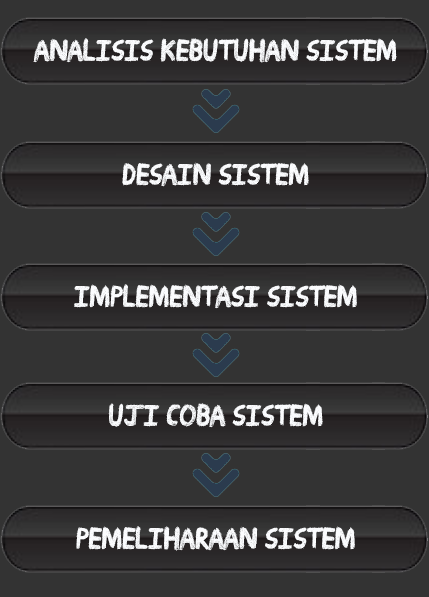
<style>
.page{position:relative;width:429px;height:597px;background:#333333}
.page>*{position:absolute;margin:0}
.t1{font:29.2px "Drawing-Guides";color:#fbfcfe;text-transform:uppercase}
</style>
<div class="page">
<p class="t1" style="left:33px;top:38px;width:364px;height:25px">Analisis Kebutuhan Sistem</p>
<p class="t1" style="left:122px;top:162px;width:187px;height:25px">Desain Sistem</p>
<p class="t1" style="left:74px;top:284px;width:283px;height:25px">Implementasi Sistem</p>
<p class="t1" style="left:108px;top:403px;width:215px;height:25px">Uji Coba Sistem</p>
<p class="t1" style="left:76px;top:526px;width:279px;height:25px">Pemeliharaan Sistem</p>
</div>
